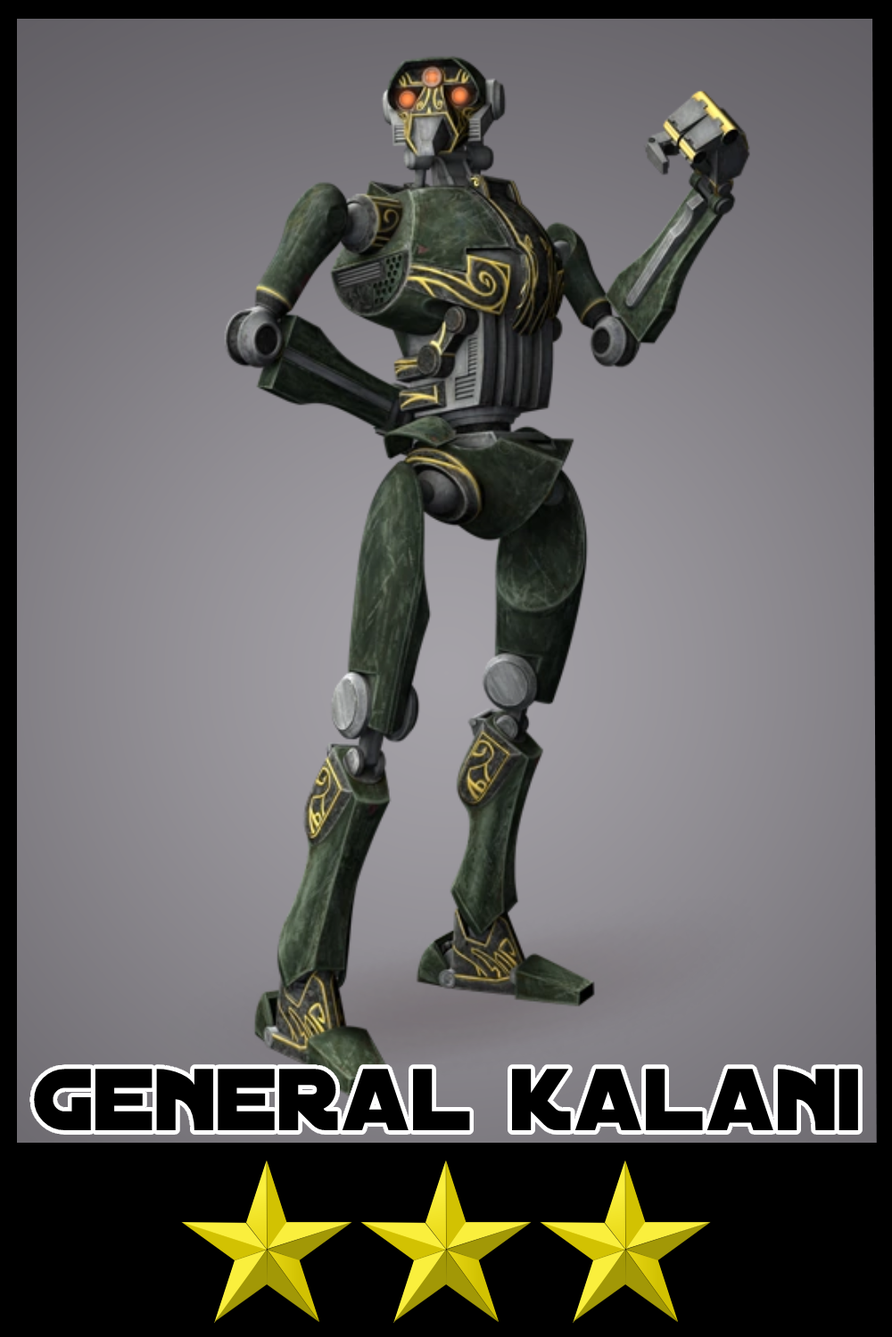
<style>
.page{position:relative;width:892px;height:1337px}
.page>*{position:absolute;margin:0}
.t1{font:94.2px "DistantGalaxy";color:#000000}
</style>
<div class="page">
<p class="t1" style="left:34px;top:1069px;width:824px;height:62px">general kalani</p>
</div>
